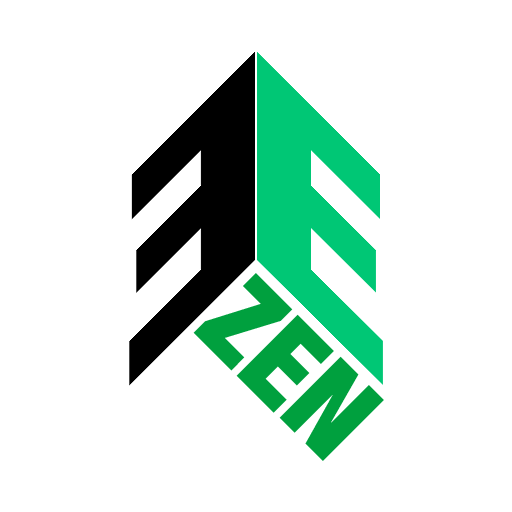
<style>
.page{position:relative;width:512px;height:512px;background:#ffffff}
.page>*{position:absolute;margin:0}
.t1{font:120.7px "HelveticaNeue-CondensedBlack";color:#00a03e}
</style>
<div class="page">
<p class="t1" style="left:193px;top:273px;width:191px;height:188px;rotate:45deg">ZEN</p>
</div>
